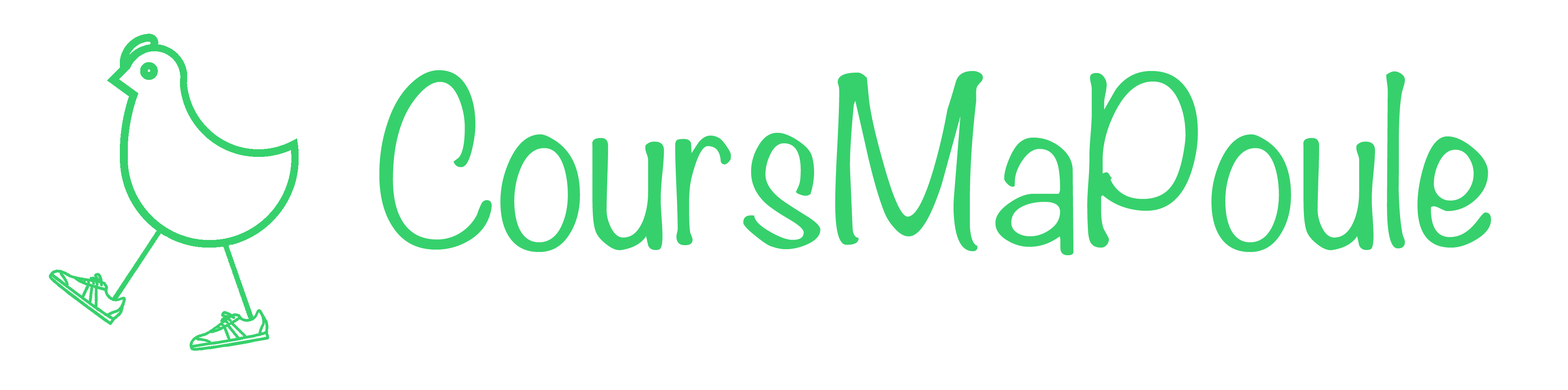
<style>
.page{position:relative;width:1568px;height:390px;background:#ffffff}
.page>*{position:absolute;margin:0}
.t1{font:200.4px "Noteworthy-Light";color:#36d16c}
</style>
<div class="page">
<p class="t1" style="left:379px;top:70px;width:1112px;height:185px">CoursMaPoule</p>
</div>
